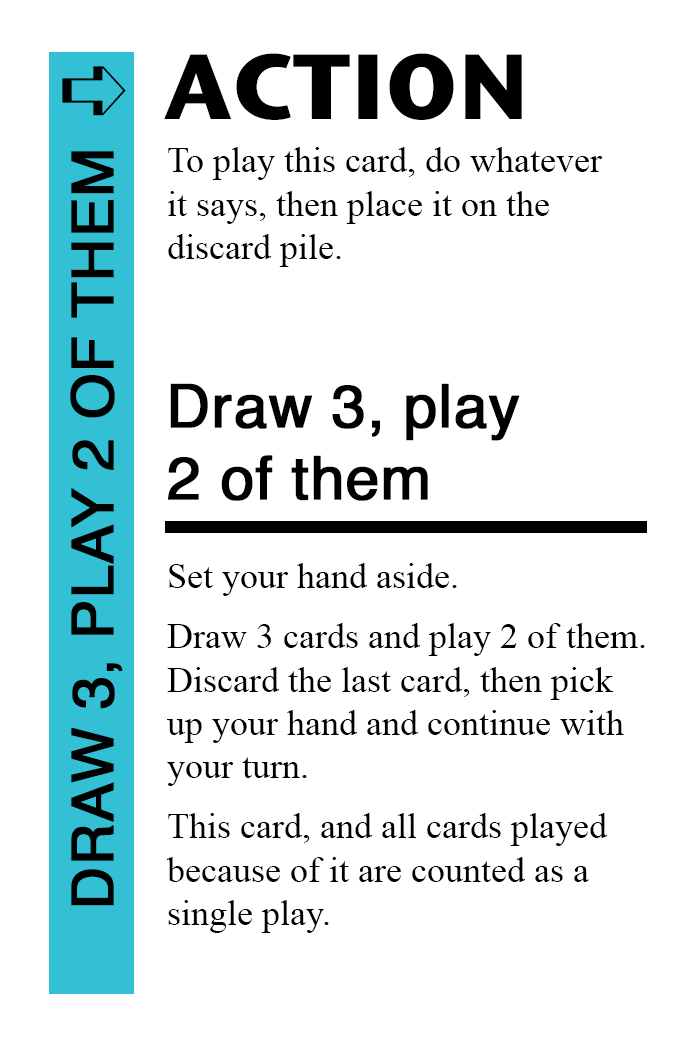
<style>
.page{position:relative;width:700px;height:1042px;background:#ffffff}
.page>*{position:absolute;margin:0}
.t1{font:92px "StoneSansITC-Bold";color:#000000}
.t2{font:82px "MS-Gothic";color:#000000}
.t3{font:36px "TimesNewRomanPSMT";color:#000000}
.t4{font:58px "Helvetica";color:#000000;font-weight:bold}
.t5{font:60px "Helvetica";color:#000000;font-weight:bold}
</style>
<div class="page">
<p class="t1" style="left:164px;top:53px;width:358px;height:67px">ACTION</p>
<p class="t2" style="left:62px;top:66px;width:64px;height:50px">➪</p>
<p class="t3" style="left:168px;top:147px;width:435px;height:120px">To play this card, do whatever<br>it says, then place it on the<br>discard pile.</p>
<p class="t4" style="left:70px;top:151px;width:53px;height:755px;rotate:-90deg">DRAW 3, PLAY 2 OF THEM</p>
<p class="t5" style="left:168px;top:383px;width:352px;height:118px">Draw 3, play<br>2 of them</p>
<p class="t3" style="left:169px;top:563px;width:288px;height:33px">Set your hand aside.</p>
<p class="t3" style="left:167px;top:623px;width:478px;height:163px">Draw 3 cards and play 2 of them.<br>Discard the last card, then pick<br>up your hand and continue with<br>your turn.</p>
<p class="t3" style="left:166px;top:813px;width:442px;height:120px">This card, and all cards played<br>because of it are counted as a <br>single play.</p>
</div>
